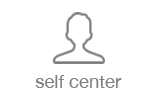
<style>
.page{position:relative;width:160px;height:98px;background:#ffffff}
.page>*{position:absolute;margin:0}
.t1{font:18.5px "HelveticaNeue";color:#807f7f}
</style>
<div class="page">
<p class="t1" style="left:35px;top:75px;width:87px;height:13px">self center</p>
</div>
